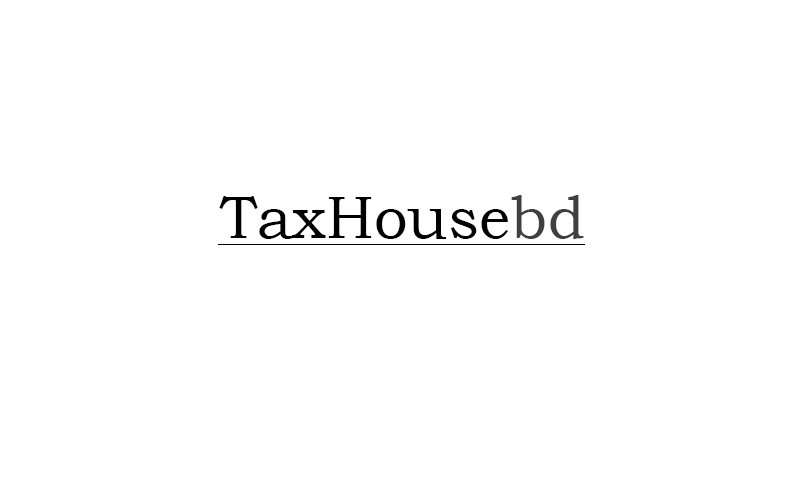
<style>
.page{position:relative;width:800px;height:500px;background:#ffffff}
.page>*{position:absolute;margin:0}
.t1{font:60px "BookmanOldStyle";color:#000000}
.t2{font:60px "BookmanOldStyle";color:#404040}
</style>
<div class="page">
<p class="t1" style="left:219px;top:195px;width:365px;height:44px">TaxHouse<span class="t2">bd</span></p>
</div>
